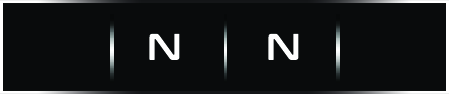
<style>
.page{position:relative;width:449px;height:94px;background:#090b0c}
.page>*{position:absolute;margin:0}
.t1{font:37.5px "ConthraxSb-Regular";color:#ffffff;scale:0.95 1}
</style>
<div class="page">
<p class="t1" style="left:149px;top:33px;width:150px;height:27px">N       N</p>
</div>
